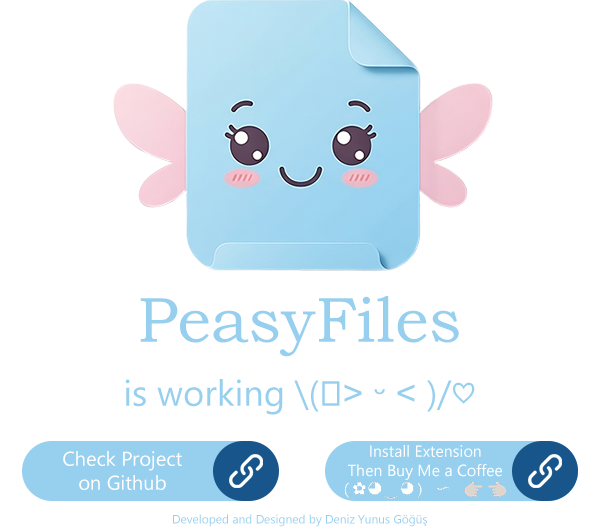
<style>
.page{position:relative;width:600px;height:528px;background:#ffffff}
.page>*{position:absolute;margin:0}
.t1{font:64px "BookmanOldStyle";color:#97d0ee}
.t2{font:36px "SegoeUI";color:#97d0ee}
.t3{font:16px "SegoeUI";color:#ffffff}
.t4{font:20px "SegoeUI";color:#ffffff}
.t5{font:12px "SegoeUI";color:#97d0ee}
</style>
<div class="page">
<p class="t1" style="left:140px;top:296px;width:319px;height:61px">PeasyFiles</p>
<p class="t2" style="left:125px;top:379px;width:350px;height:36px">is working \(｡˃ ᵕ ˂ )/♡</p>
<p class="t3" style="left:348px;top:445px;width:154px;height:35px;text-align:center">Install Extension<br>Then Buy Me a Coffee</p>
<p class="t4" style="left:63px;top:451px;width:119px;height:39px;text-align:center">Check Project<br>on Github</p>
<p class="t5" style="left:173px;top:514px;width:254px;height:13px">Developed and Designed by Deniz Yunus Göğüş</p>
</div>
